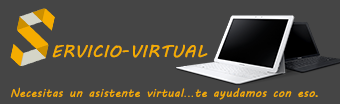
<style>
.page{position:relative;width:340px;height:104px;background:#454545}
.page>*{position:absolute;margin:0}
.t1{font:16.7px "MVBoli";letter-spacing:0.025em;color:#f5ac00;font-weight:bold}
.t2{font:11.1px "MVBoli";letter-spacing:0.025em;color:#f5ac00;font-weight:bold}
.t3{font:11.1px "ArialMT";letter-spacing:0.025em;color:#f5ac00;font-weight:bold}
.t4{font:11.1px "Arial-BoldMT";letter-spacing:0.025em;color:#f5ac00;font-weight:bold}
</style>
<div class="page">
<p class="t1" style="left:52px;top:44px;width:156px;height:14px">ERVICIO-VIRTUAL</p>
<p class="t2" style="left:11px;top:87px;width:307px;height:13px">Necesitas un asistente virtual<span class="t3">...</span>te ayudamos con eso<span class="t4">.</span></p>
</div>
